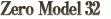
<style>
.page{position:relative;width:111px;height:19px;background:#ffffff}
.page>*{position:absolute;margin:0}
.t1{font:18px "RyuminPro-ExBold";letter-spacing:-0.08em;color:#4a3f32;font-weight:bold;scale:0.9 1}
</style>
<div class="page">
<p class="t1" style="left:0px;top:1px;width:101px;height:15px">Zero Model 32</p>
</div>
